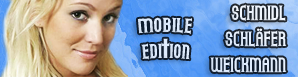
<style>
.page{position:relative;width:298px;height:77px}
.page>*{position:absolute;margin:0}
.t1{font:18px/26px "Gothicum";letter-spacing:0.001em;color:#e1edfd}
.t2{font:18px/26px "Gothicum";letter-spacing:0.001em;color:#ddebfc}
</style>
<div class="page">
<p class="t1" style="left:210px;top:4px;width:77px;height:69px;text-align:right">SCHMIDL<br>SCHLÄFER<br>WEICKMANN</p>
<p class="t2" style="left:137px;top:17px;width:55px;height:43px;text-align:right">MOBILE<br>Edition</p>
</div>
